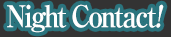
<style>
.page{position:relative;width:171px;height:37px;background:#2a747e}
.page>*{position:absolute;margin:0}
.t1{font:30px "RyuminPro-ExBold";letter-spacing:-0.08em;color:#ffffff;scale:0.9 1}
.t2{font:30px "RyuminPro-ExBold";letter-spacing:-0.08em;color:#ffffff;font-style:italic;scale:0.9 1}
</style>
<div class="page">
<p class="t1" style="left:7px;top:4px;width:157px;height:29px">Night Contact<span class="t2">!</span></p>
</div>
